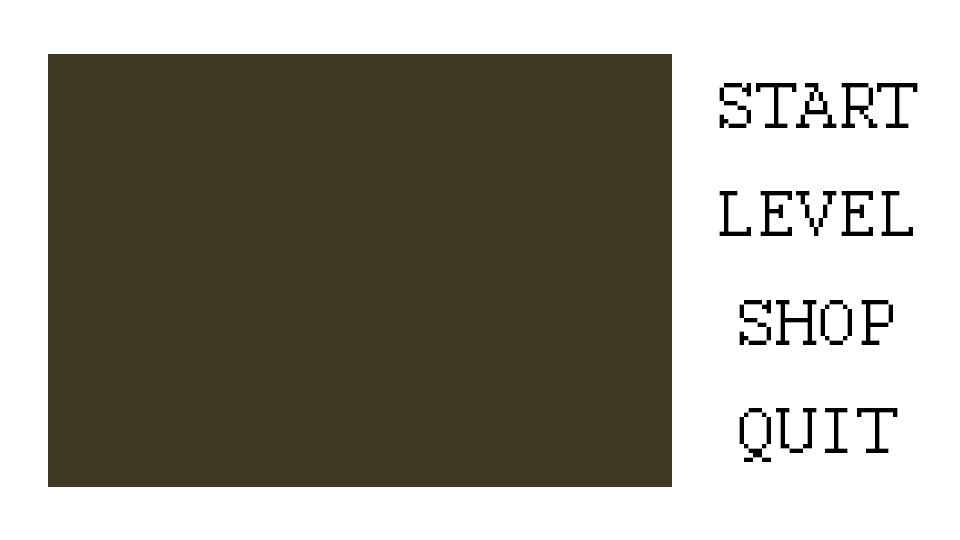
<style>
.page{position:relative;width:960px;height:540px;background:#3f3926}
.page>*{position:absolute;margin:0}
.t1{font:72px "Courier";color:#000000}
</style>
<div class="page">
<p class="t1" style="left:719px;top:83px;width:199px;height:45px">START</p>
<p class="t1" style="left:719px;top:191px;width:194px;height:45px">LEVEL</p>
<p class="t1" style="left:739px;top:300px;width:154px;height:45px">SHOP</p>
<p class="t1" style="left:739px;top:408px;width:159px;height:54px">QUIT</p>
</div>
